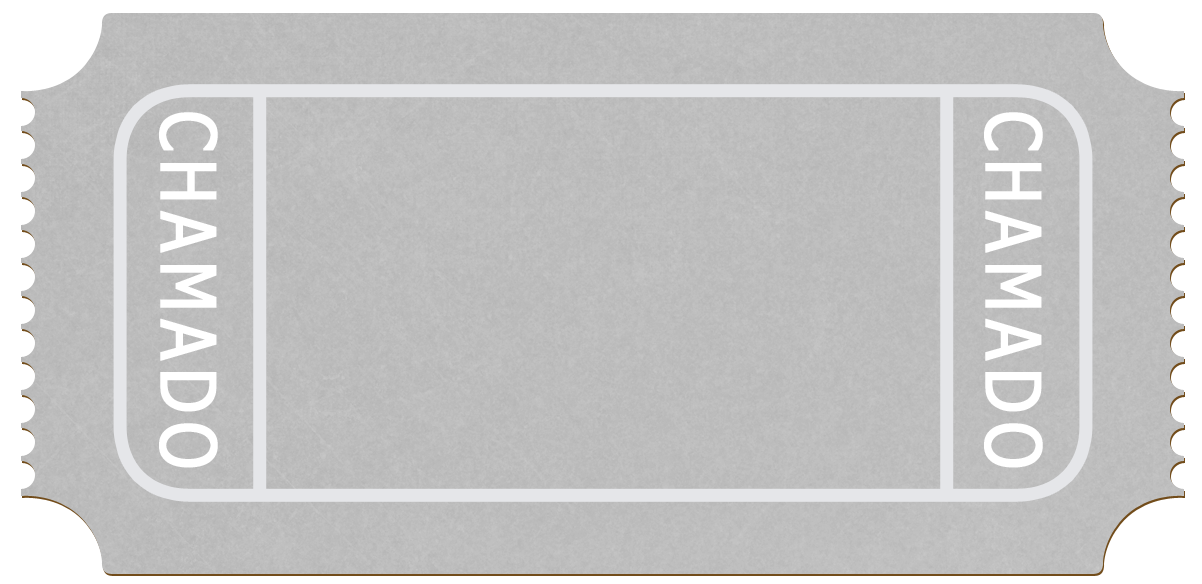
<style>
.page{position:relative;width:1202px;height:584px}
.page>*{position:absolute;margin:0}
.t1{font:76px "Tahoma";letter-spacing:0.1em;color:#ffffff;text-transform:uppercase;font-weight:bold;scale:0.87 1}
</style>
<div class="page">
<p class="t1" style="left:159px;top:112px;width:59px;height:356px;rotate:90deg">chamado</p>
<p class="t1" style="left:984px;top:112px;width:59px;height:356px;rotate:90deg">chamado</p>
</div>
